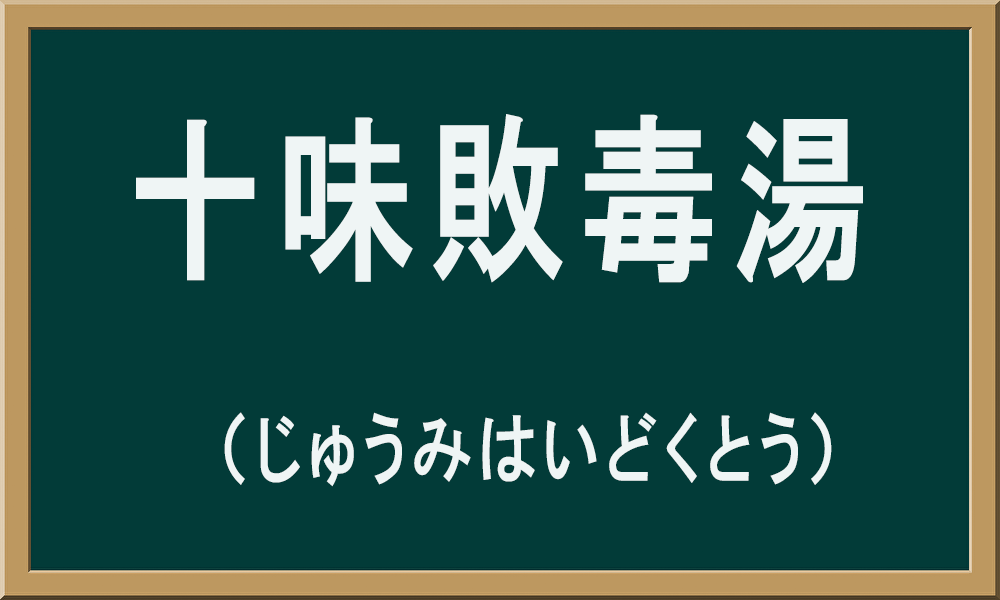
<style>
.page{position:relative;width:1000px;height:600px;background:#023b38}
.page>*{position:absolute;margin:0}
.t1{font:78.7px/149.3px "HGPGothicE";letter-spacing:0.1em;color:#eff5f5;scale:0.77 1}
.t2{font:179.2px/149.3px "HGPGothicE";letter-spacing:0.1em;color:#eff5f5;scale:0.77 1}
</style>
<div class="page">
<p class="t1" style="left:136px;top:114px;width:727px;height:373px"><span class="t2">十味敗毒湯<br><br></span>　　（じゅうみはいどくとう）</p>
</div>
